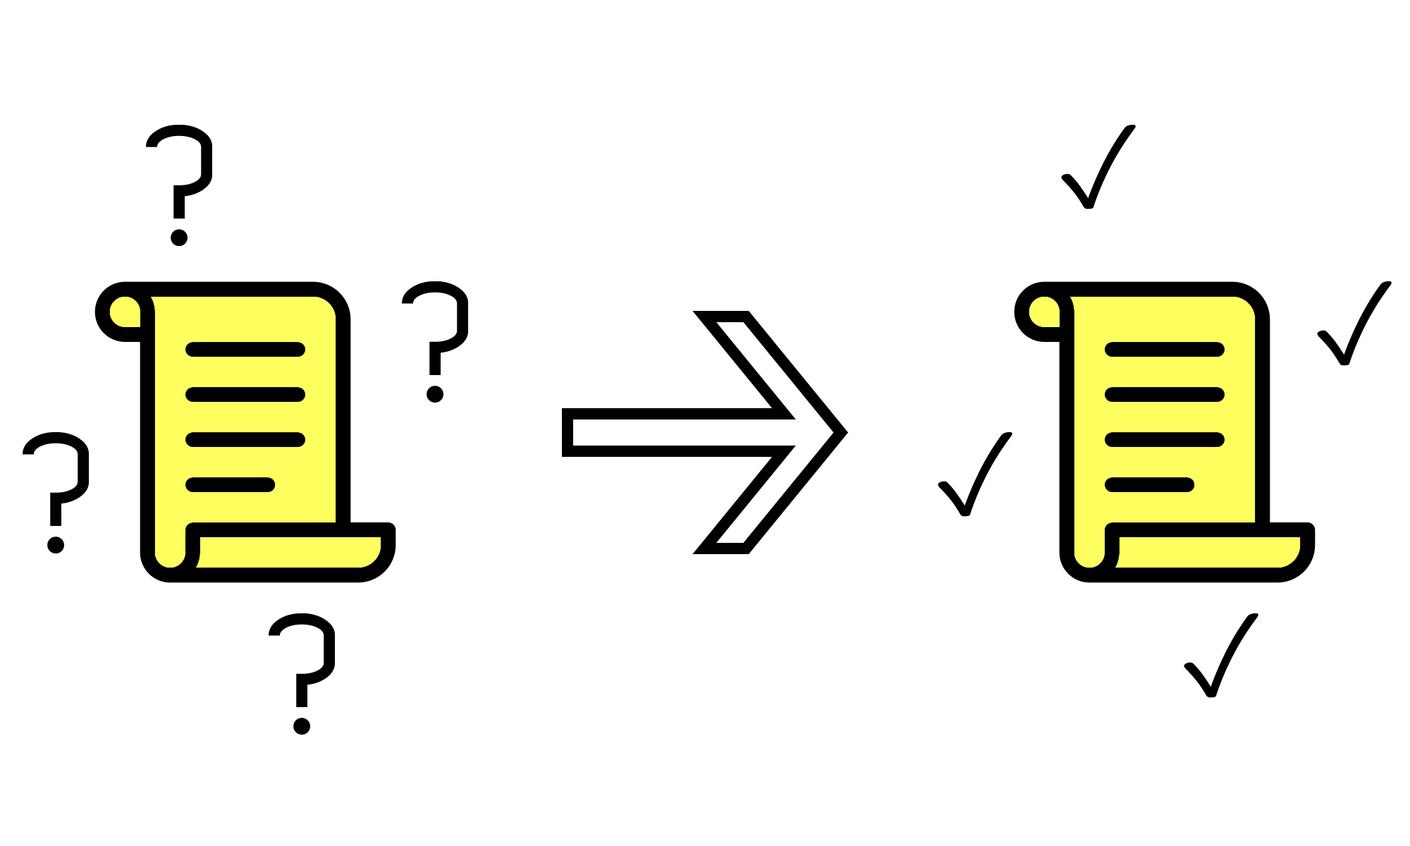
<style>
.page{position:relative;width:1410px;height:846px;background:#ffffff}
.page>*{position:absolute;margin:0}
.t1{font:112.8px "EleganTech";color:#000000}
.t2{font:112.8px "SegoeUISymbol";color:#000000}
</style>
<div class="page">
<p class="t1" style="left:146px;top:125px;width:66px;height:121px">?</p>
<p class="t2" style="left:1061px;top:124px;width:75px;height:85px">✓</p>
<p class="t1" style="left:402px;top:281px;width:66px;height:121px">?</p>
<p class="t2" style="left:1317px;top:281px;width:74px;height:85px">✓</p>
<p class="t1" style="left:23px;top:432px;width:66px;height:121px">?</p>
<p class="t2" style="left:937px;top:431px;width:75px;height:86px">✓</p>
<p class="t1" style="left:269px;top:613px;width:66px;height:121px">?</p>
<p class="t2" style="left:1183px;top:613px;width:75px;height:85px">✓</p>
</div>
